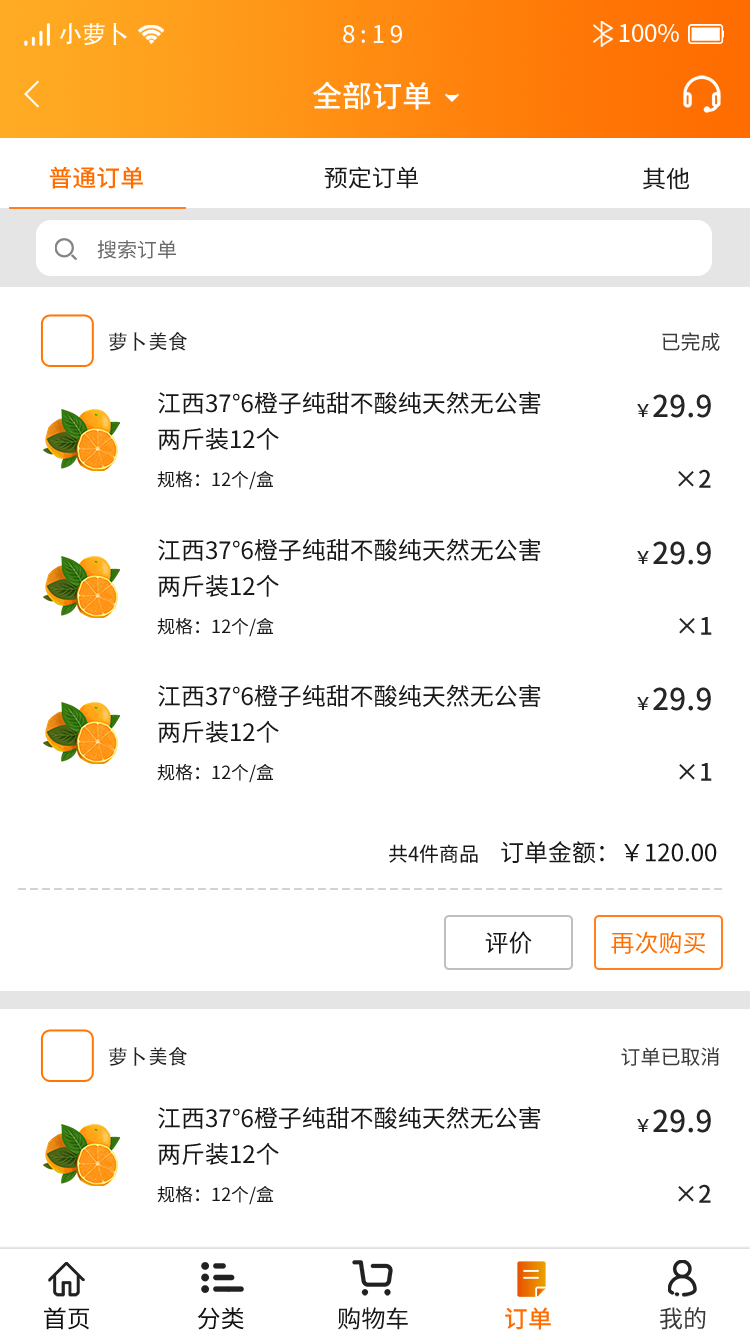
<style>
.page{position:relative;width:750px;height:1334px;background:#ffffff}
.page>*{position:absolute;margin:0}
.t1{font:24px "AdobeHeitiStd-Regular";color:#ffffff}
.t2{font:24px "SourceHanSansCN-Regular";letter-spacing:0.2em;color:#ffffff}
.t3{font:24px "SourceHanSansCN-Regular";color:#ffffff}
.t4{font:30px "SourceHanSansCN-Medium";color:#ffffff}
.t5{font:23.6px "SourceHanSansCN-Medium";color:#ff6d00}
.t6{font:23.6px "SourceHanSansCN-Regular";color:#1a1a1a}
.t7{font:20px "SourceHanSansCN-Regular";color:#6a6a6a}
.t8{font:20px "AdobeHeitiStd-Regular";color:#232323}
.t9{font:20px "SourceHanSansCN-Regular";color:#3c3c3c}
.t10{font:24px/36px "SourceHanSansCN-Regular";color:#181818}
.t11{font:30px "SourceHanSansCN-Medium";color:#252525}
.t12{font:18px "SourceHanSansCN-Medium";color:#252525}
.t13{font:18px "SourceHanSansCN-Regular";color:#181818}
.t14{font:24px "SourceHanSansCN-Medium";color:#252525}
.t15{font:20px "SourceHanSansCN-Regular";color:#181818}
.t16{font:24px "SourceHanSansCN-Regular";color:#181818}
.t17{font:24px "SourceHanSansCN-Regular";color:#ff6e01}
.t18{font:24.2px "SourceHanSansCN-Regular";color:#0f0f0f}
.t19{font:24.2px "SourceHanSansCN-Regular";color:#121212}
.t20{font:24.2px "SourceHanSansCN-Regular";color:#1a1a1a}
.t21{font:24.2px "SourceHanSansCN-Medium";color:#ff6c00}
.t22{font:24.2px "SourceHanSansCN-Regular";color:#393939}
</style>
<div class="page">
<p class="t1" style="left:59px;top:23px;width:68px;height:22px">小萝卜</p>
<p class="t2" style="left:343px;top:25px;width:59px;height:18px">8:19</p>
<p class="t3" style="left:619px;top:24px;width:60px;height:18px">100%</p>
<p class="t4" style="left:312px;top:81px;width:119px;height:29px">全部订单</p>
<p class="t5" style="left:49px;top:166px;width:94px;height:23px">普通订单</p>
<p class="t6" style="left:324px;top:166px;width:94px;height:23px">预定订单</p>
<p class="t6" style="left:643px;top:167px;width:46px;height:23px">其他</p>
<p class="t7" style="left:97px;top:240px;width:79px;height:19px">搜索订单</p>
<p class="t8" style="left:109px;top:331px;width:78px;height:20px">萝卜美食</p>
<p class="t9" style="left:662px;top:332px;width:58px;height:19px">已完成</p>
<p class="t10" style="left:158px;top:391px;width:383px;height:59px">江西37°6橙子纯甜不酸纯天然无公害<br>两斤装12个</p>
<p class="t11" style="left:637px;top:394px;width:74px;height:24px"><span class="t12">￥</span>29.9</p>
<p class="t13" style="left:157px;top:471px;width:117px;height:19px">规格：12个/盒</p>
<p class="t14" style="left:678px;top:469px;width:33px;height:19px">×2</p>
<p class="t10" style="left:158px;top:538px;width:383px;height:59px">江西37°6橙子纯甜不酸纯天然无公害<br>两斤装12个</p>
<p class="t11" style="left:637px;top:541px;width:74px;height:24px"><span class="t12">￥</span>29.9</p>
<p class="t14" style="left:679px;top:617px;width:33px;height:18px">×1</p>
<p class="t13" style="left:157px;top:618px;width:117px;height:19px">规格：12个/盒</p>
<p class="t10" style="left:158px;top:684px;width:383px;height:59px">江西37°6橙子纯甜不酸纯天然无公害<br>两斤装12个</p>
<p class="t11" style="left:637px;top:687px;width:74px;height:24px"><span class="t12">￥</span>29.9</p>
<p class="t13" style="left:157px;top:764px;width:117px;height:19px">规格：12个/盒</p>
<p class="t14" style="left:679px;top:763px;width:33px;height:18px">×1</p>
<p class="t15" style="left:389px;top:844px;width:89px;height:19px">共4件商品</p>
<p class="t16" style="left:501px;top:841px;width:216px;height:23px">订单金额：￥120.00</p>
<p class="t16" style="left:485px;top:931px;width:47px;height:23px">评价</p>
<p class="t17" style="left:611px;top:931px;width:94px;height:23px">再次购买</p>
<p class="t8" style="left:109px;top:1046px;width:78px;height:20px">萝卜美食</p>
<p class="t9" style="left:621px;top:1047px;width:98px;height:19px">订单已取消</p>
<p class="t10" style="left:158px;top:1106px;width:383px;height:59px">江西37°6橙子纯甜不酸纯天然无公害<br>两斤装12个</p>
<p class="t11" style="left:637px;top:1109px;width:74px;height:24px"><span class="t12">￥</span>29.9</p>
<p class="t13" style="left:157px;top:1186px;width:117px;height:19px">规格：12个/盒</p>
<p class="t14" style="left:678px;top:1184px;width:33px;height:19px">×2</p>
<p class="t18" style="left:44px;top:1307px;width:45px;height:23px">首页</p>
<p class="t19" style="left:197px;top:1307px;width:47px;height:23px">分类</p>
<p class="t20" style="left:338px;top:1307px;width:70px;height:23px">购物车</p>
<p class="t21" style="left:505px;top:1307px;width:46px;height:23px">订单</p>
<p class="t22" style="left:660px;top:1307px;width:46px;height:23px">我的</p>
</div>
